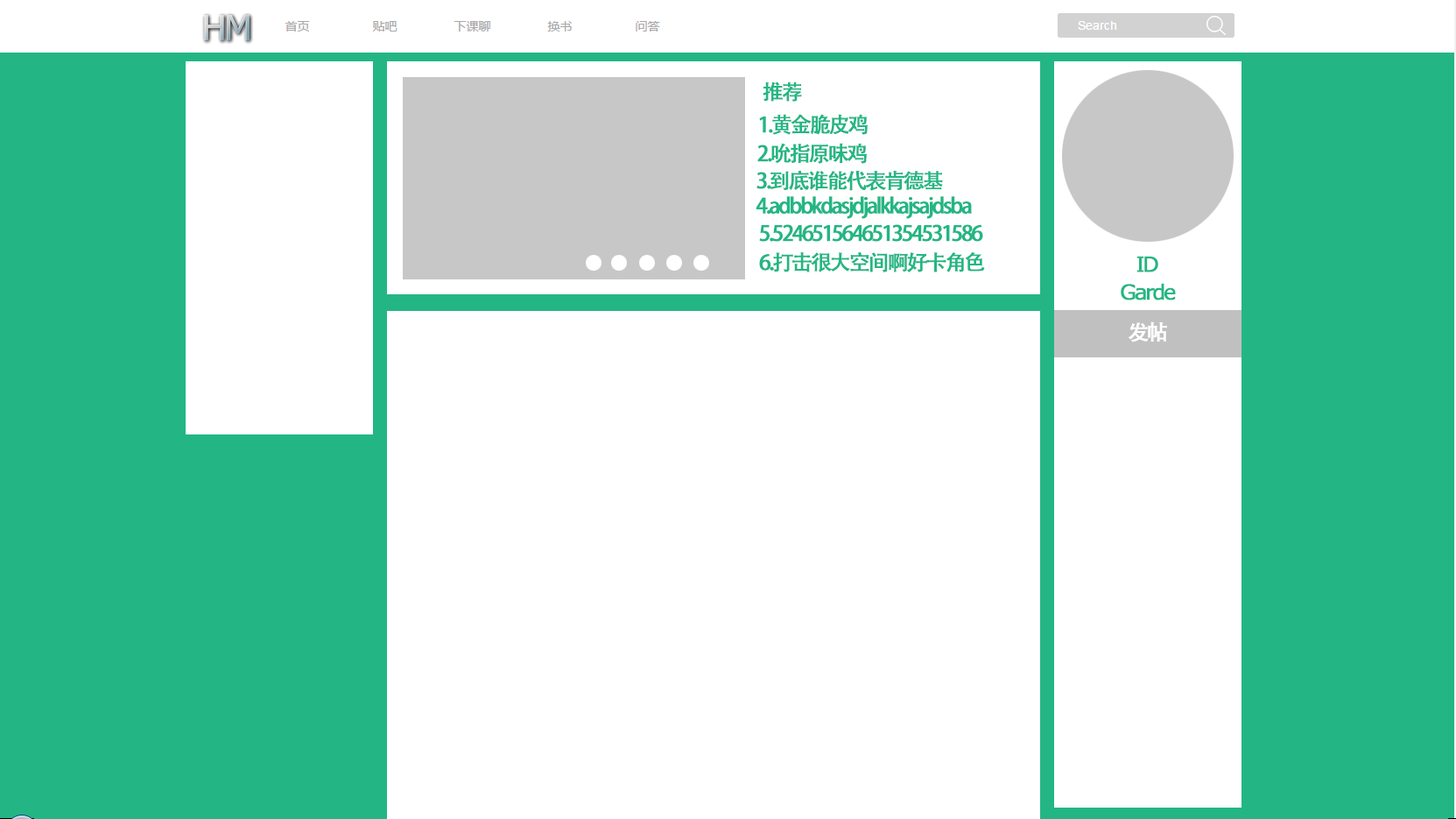
<style>
.page{position:relative;width:1456px;height:819px;background:#ffffff}
.page>*{position:absolute;margin:0}
.t1{font:21px "AdobeHeitiStd-Regular";letter-spacing:-0.115em;color:#23b684;font-weight:bold}
.t2{font:21px "Verdana";letter-spacing:-0.115em;color:#23b684;font-weight:bold}
.t3{font:21px "AdobeHeitiStd-Regular";letter-spacing:-0.115em;color:#fefefe;font-weight:bold}
</style>
<div class="page">
<p class="t1" style="left:763px;top:81px;width:39px;height:21px">推荐</p>
<p class="t1" style="left:759px;top:114px;width:109px;height:21px">1.黄金脆皮鸡</p>
<p class="t1" style="left:757px;top:143px;width:110px;height:21px">2.吮指原味鸡</p>
<p class="t1" style="left:757px;top:170px;width:186px;height:21px">3.到底谁能代表肯德基</p>
<p class="t1" style="left:756px;top:196px;width:216px;height:23px">4.adbbkdasjdjalkkajsajdsba</p>
<p class="t1" style="left:759px;top:224px;width:224px;height:18px">5.524651564651354531586</p>
<p class="t1" style="left:759px;top:252px;width:226px;height:20px">6.打击很大空间啊好卡角色</p>
<p class="t2" style="left:1137px;top:256px;width:22px;height:16px">ID</p>
<p class="t2" style="left:1121px;top:283px;width:55px;height:17px">Garde</p>
<p class="t3" style="left:1128px;top:321px;width:39px;height:21px">发帖</p>
</div>
